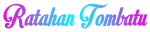
<style>
.page{position:relative;width:150px;height:32px;background:#ffffff}
.page>*{position:absolute;margin:0}
.t1{font:30px "MotionPicturePersonalUse"}
</style>
<div class="page">
<p class="t1" style="left:3px;top:3px;width:145px;height:26px">Ratahan Tombatu</p>
</div>
